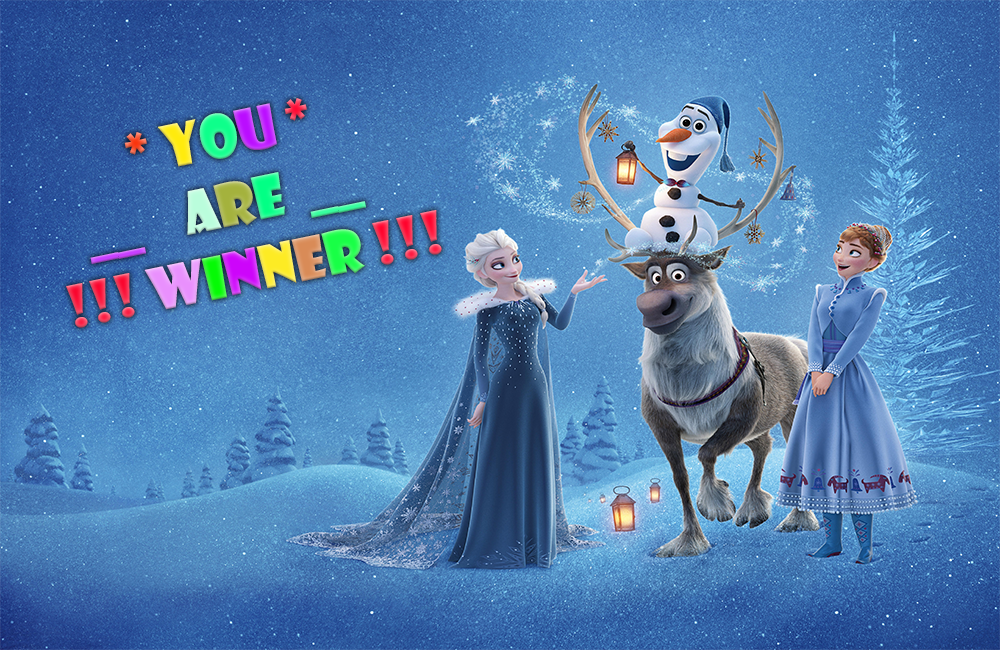
<style>
.page{position:relative;width:1000px;height:650px}
.page>*{position:absolute;margin:0}
.t1{font:57.3px "ShowcardGothic-Reg"}
</style>
<div class="page">
<p class="t1" style="left:66px;top:98px;width:376px;height:230px;rotate:-12deg">* YOU *<br>   __    are  __<br>!!! Winner !!!</p>
</div>
